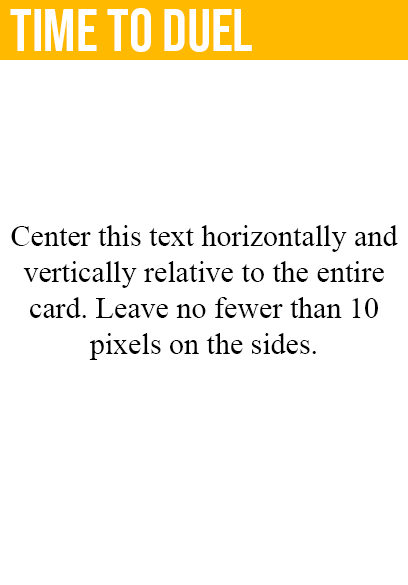
<style>
.page{position:relative;width:408px;height:585px;background:#ffffff}
.page>*{position:absolute;margin:0}
.t1{font:60px "BebasNeue-Regular";color:#ffffff}
.t2{font:30px "TimesNewRomanPSMT";color:#000000}
</style>
<div class="page">
<p class="t1" style="left:10px;top:8px;width:242px;height:44px">time to duel</p>
<p class="t2" style="left:11px;top:225px;width:387px;height:135px;text-align:center">Center this text horizontally and<br>vertically relative to the entire<br>card. Leave no fewer than 10<br>pixels on the sides.</p>
</div>
